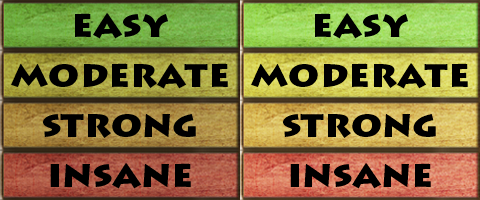
<style>
.page{position:relative;width:480px;height:200px}
.page>*{position:absolute;margin:0}
.t1{font:38px "LithosPro-Black";color:#000000}
</style>
<div class="page">
<p class="t1" style="left:75px;top:13px;width:93px;height:26px">easy</p>
<p class="t1" style="left:315px;top:13px;width:93px;height:26px">easy</p>
<p class="t1" style="left:11px;top:63px;width:217px;height:26px">moderate</p>
<p class="t1" style="left:251px;top:63px;width:217px;height:26px">moderate</p>
<p class="t1" style="left:43px;top:114px;width:153px;height:24px">strong</p>
<p class="t1" style="left:283px;top:114px;width:153px;height:24px">strong</p>
<p class="t1" style="left:50px;top:163px;width:141px;height:26px">insane</p>
<p class="t1" style="left:290px;top:163px;width:141px;height:26px">insane</p>
</div>
